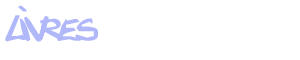
<style>
.page{position:relative;width:300px;height:60px;background:#ffffff}
.page>*{position:absolute;margin:0}
.t1{font:60px "Texted'critureLanfeust";color:#b0b8f9}
</style>
<div class="page">
<p class="t1" style="left:5px;top:5px;width:93px;height:37px">livres</p>
</div>
